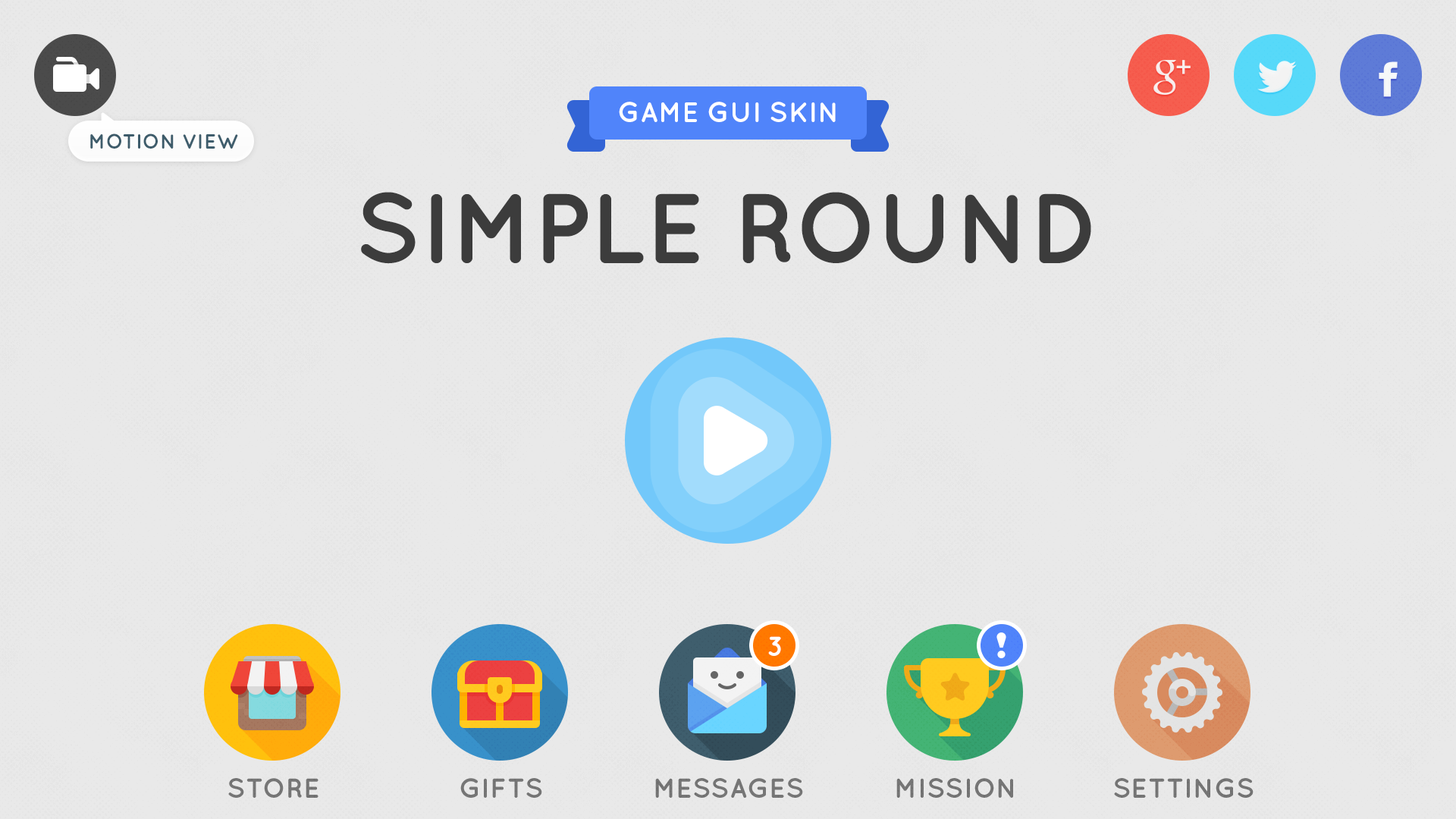
<style>
.page{position:relative;width:1456px;height:819px;background:#e9e9e9}
.page>*{position:absolute;margin:0}
.t1{font:28.1px "Quicksand-Bold";color:#ffffff;text-transform:uppercase}
.t2{font:20.5px "Quicksand-Bold";color:#3f5e6d;text-transform:uppercase}
.t3{font:98.6px "Quicksand-Bold";color:#3c3c3c;text-transform:uppercase}
.t4{font:27.3px "Quicksand-Bold";color:#ffffff;text-transform:uppercase}
.t5{font:27.3px "Quicksand-Bold";color:#767676;text-transform:uppercase}
</style>
<div class="page">
<p class="t1" style="left:619px;top:102px;width:217px;height:20px">Game gui skin</p>
<p class="t2" style="left:90px;top:133px;width:148px;height:16px">Motion View</p>
<p class="t3" style="left:361px;top:192px;width:730px;height:72px">Simple Round</p>
<p class="t4" style="left:768px;top:636px;width:13px;height:20px">3</p>
<p class="t5" style="left:228px;top:778px;width:90px;height:20px">Store</p>
<p class="t5" style="left:460px;top:778px;width:82px;height:20px">Gifts</p>
<p class="t5" style="left:655px;top:778px;width:148px;height:20px">Messages</p>
<p class="t5" style="left:896px;top:778px;width:117px;height:20px">Mission</p>
<p class="t5" style="left:1114px;top:778px;width:140px;height:20px">Settings</p>
</div>
